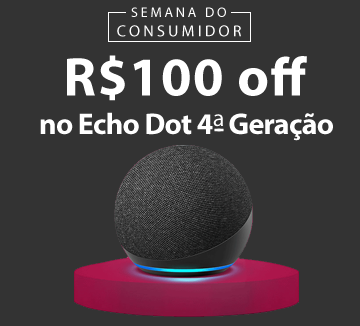
<style>
.page{position:relative;width:360px;height:326px;background:#333333}
.page>*{position:absolute;margin:0}
.t1{font:16px "MyriadPro-Regular";letter-spacing:0.2em;color:#ffffff}
.t2{font:14px "MyriadPro-Regular";letter-spacing:0.2em;color:#ffffff}
.t3{font:55px "MyriadPro-Bold";letter-spacing:0.025em;color:#ffffff}
.t4{font:30px "MyriadPro-Bold";letter-spacing:-0.025em;color:#ffffff}
</style>
<div class="page">
<p class="t1" style="left:117px;top:7px;width:124px;height:30px;text-align:center"><span class="t2">SEMANA DO<br></span>CONSUMIDOR</p>
<p class="t3" style="left:67px;top:55px;width:240px;height:46px">R$100 off</p>
<p class="t4" style="left:40px;top:112px;width:293px;height:29px">no Echo Dot 4   Geração</p>
</div>
